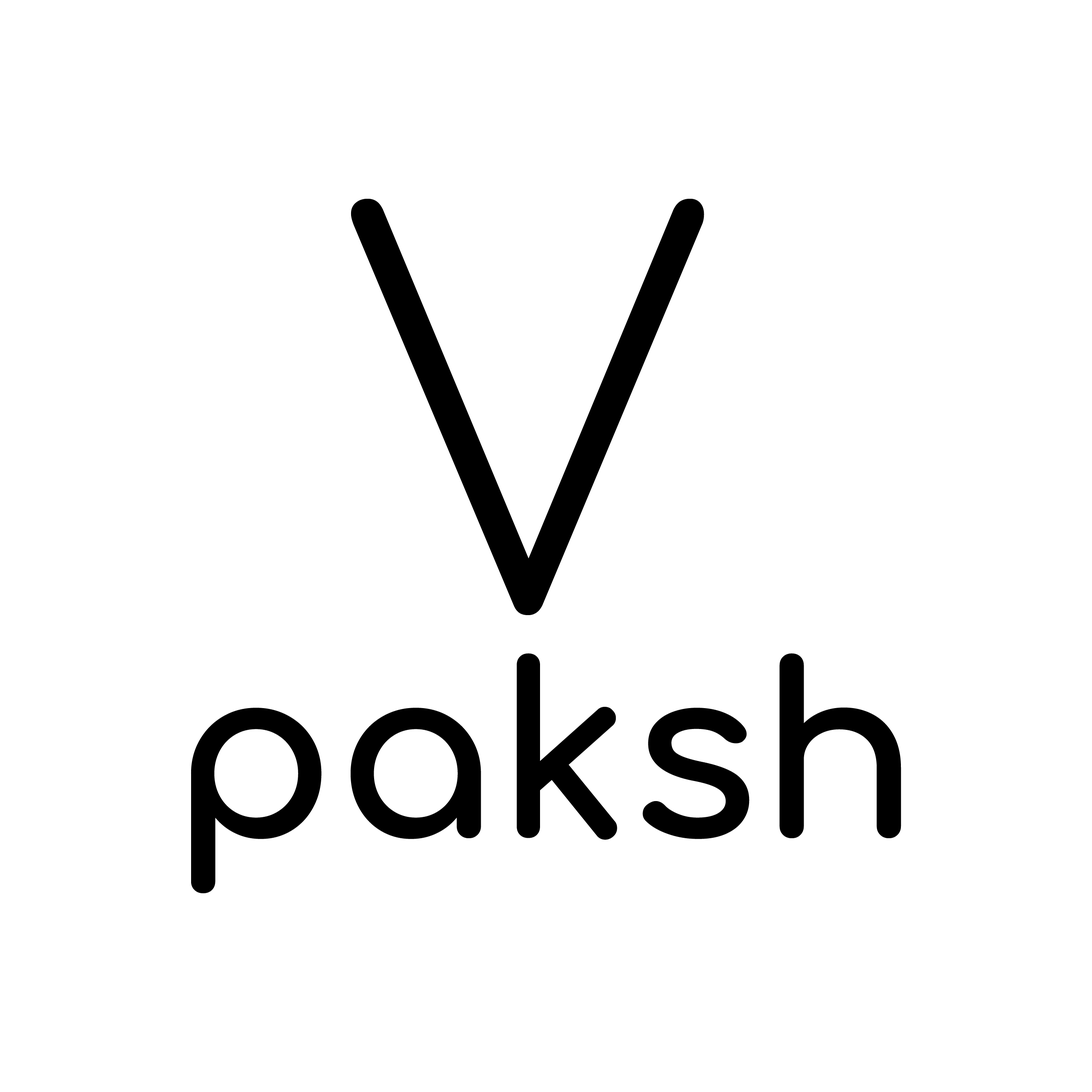
<style>
.page{position:relative;width:1092px;height:1092px;background:#ffffff}
.page>*{position:absolute;margin:0}
.t1{font:533.1px "Comfortaa-Light";color:#000000;text-transform:uppercase}
.t2{font:236.2px "Comfortaa-Bold";color:#000000}
</style>
<div class="page">
<p class="t1" style="left:351px;top:199px;width:353px;height:416px">V</p>
<p class="t2" style="left:191px;top:653px;width:710px;height:241px">paksh</p>
</div>
